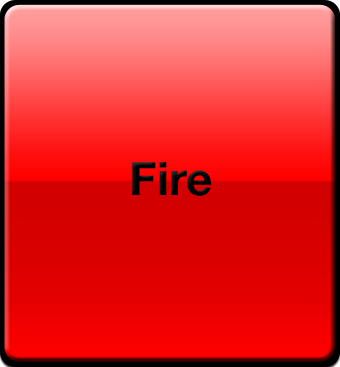
<style>
.page{position:relative;width:340px;height:367px}
.page>*{position:absolute;margin:0}
.t1{font:46px "HelveticaNeue-Bold";letter-spacing:0.005em;color:#000000}
</style>
<div class="page">
<p class="t1" style="left:132px;top:162px;width:79px;height:34px">Fire</p>
</div>
